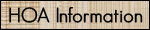
<style>
.page{position:relative;width:150px;height:30px}
.page>*{position:absolute;margin:0}
.t1{font:20px "GeosansLight";color:#000000;font-weight:bold}
</style>
<div class="page">
<p class="t1" style="left:9px;top:7px;width:134px;height:16px">HOA Information</p>
</div>
